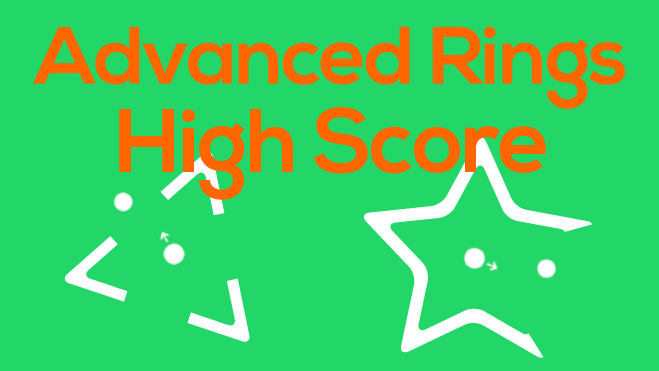
<style>
.page{position:relative;width:659px;height:371px;background:#22d668}
.page>*{position:absolute;margin:0}
.t1{font:81.4px "NexaBold";letter-spacing:-0.02em;color:#ff6600}
.t2{font:89.8px "NexaBold";letter-spacing:-0.02em;color:#ff6600}
</style>
<div class="page">
<p class="t1" style="left:33px;top:26px;width:593px;height:83px">Advanced Rings</p>
<p class="t2" style="left:119px;top:107px;width:427px;height:93px">High Score</p>
</div>
